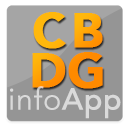
<style>
.page{position:relative;width:128px;height:128px;background:#959595}
.page>*{position:absolute;margin:0}
.t1{font:48px/40px "Avenir-Black";letter-spacing:0.1em;color:#ffa405;text-transform:uppercase;font-weight:bold}
.t2{font:48px/40px "Avenir-Black";color:#ffa405;text-transform:uppercase;font-weight:bold}
.t3{font:30px "Avenir-Light";color:#dadada;font-weight:bold}
.t4{font:30px "Avenir-Medium";color:#dadada;font-weight:bold}
</style>
<div class="page">
<p class="t1" style="left:32px;top:12px;width:71px;height:77px;text-align:center">cb<br><span class="t2">dg</span></p>
<p class="t3" style="left:10px;top:86px;width:111px;height:33px">info<span class="t4">App</span></p>
</div>
